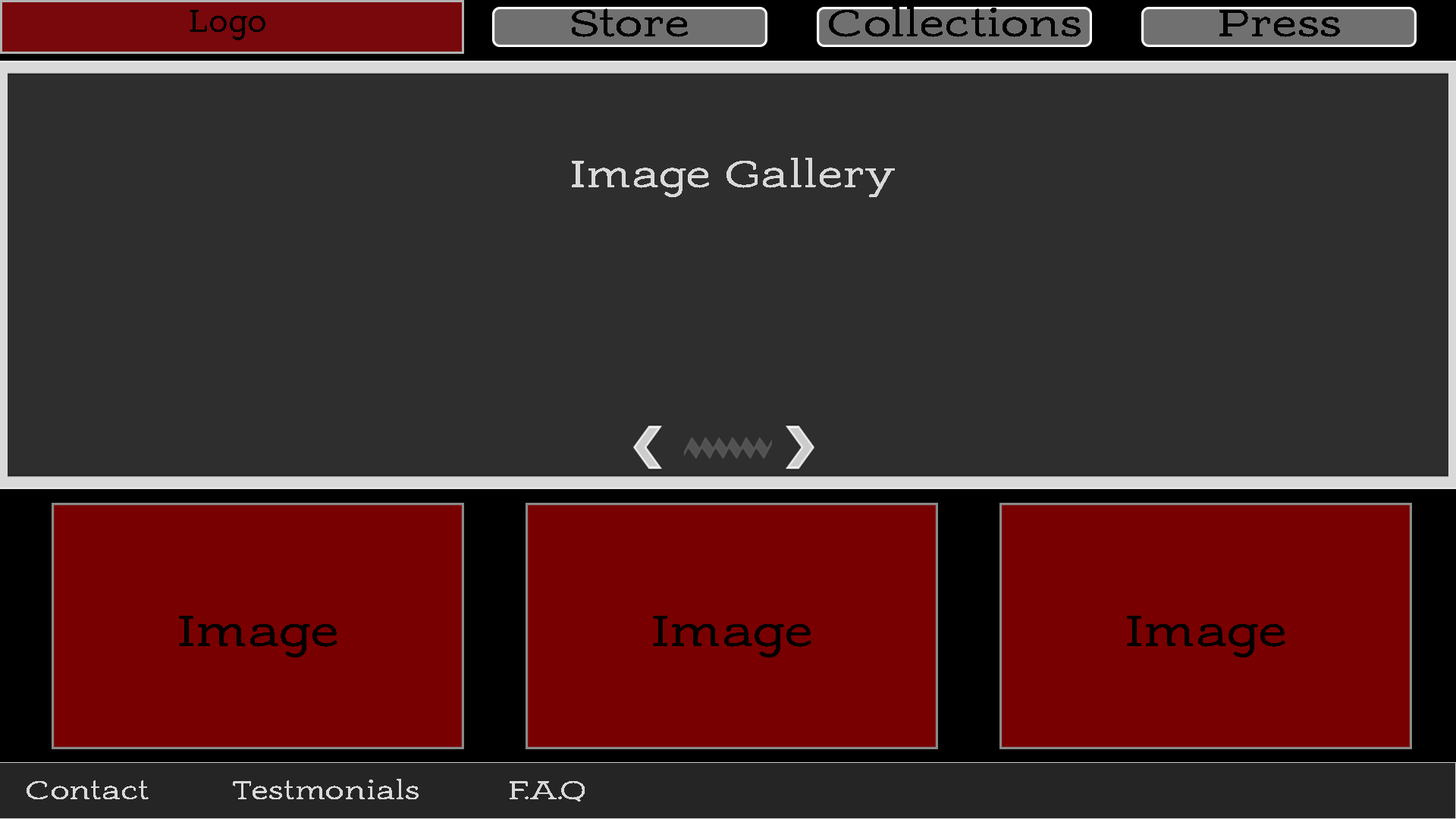
<style>
.page{position:relative;width:1456px;height:819px;background:#2e2e2e}
.page>*{position:absolute;margin:0}
.t1{font:33.4px "AdornSSlabSerif";color:#000000;scale:0.81 1}
.t2{font:39.8px "AdornSSlabSerif";color:#000000}
.t3{font:39.8px "AdornSSlabSerif";color:#d9d9d9}
.t4{font:45.5px "AdornSSlabSerif";color:#000000}
.t5{font:27.3px "AdornSSlabSerif";color:#d9d9d9}
</style>
<div class="page">
<p class="t1" style="left:190px;top:10px;width:75px;height:30px">Logo</p>
<p class="t2" style="left:572px;top:8px;width:116px;height:29px">Store</p>
<p class="t2" style="left:829px;top:7px;width:252px;height:30px">Collections</p>
<p class="t2" style="left:1219px;top:10px;width:121px;height:27px">Press</p>
<p class="t3" style="left:572px;top:158px;width:323px;height:39px">Image Gallery</p>
<p class="t4" style="left:179px;top:616px;width:158px;height:41px">Image</p>
<p class="t4" style="left:653px;top:616px;width:158px;height:41px">Image</p>
<p class="t4" style="left:1127px;top:616px;width:158px;height:41px">Image</p>
<p class="t5" style="left:27px;top:780px;width:122px;height:19px">Contact</p>
<p class="t5" style="left:233px;top:779px;width:186px;height:20px">Testmonials</p>
<p class="t5" style="left:510px;top:781px;width:75px;height:21px">F.A.Q</p>
</div>
